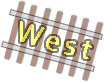
<style>
.page{position:relative;width:105px;height:83px;background:#ffffff}
.page>*{position:absolute;margin:0}
.t1{font:30px "Corbel";letter-spacing:0.13em;font-weight:bold}
</style>
<div class="page">
<p class="t1" style="left:20px;top:21px;width:72px;height:38px;rotate:15deg">West</p>
</div>
